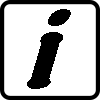
<style>
.page{position:relative;width:100px;height:100px;background:#ffffff}
.page>*{position:absolute;margin:0}
.t1{font:125.4px "TektonPro-BoldObl";color:#000000;scale:1.7 1}
</style>
<div class="page">
<p class="t1" style="left:27px;top:9px;width:44px;height:80px">i</p>
</div>
